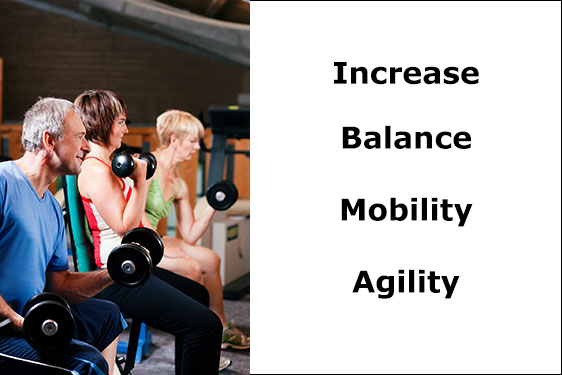
<style>
.page{position:relative;width:562px;height:375px;background:#ffffff}
.page>*{position:absolute;margin:0}
.t1{font:30px "Verdana-Bold";color:#000000}
</style>
<div class="page">
<p class="t1" style="left:334px;top:62px;width:145px;height:237px;text-align:center">Increase<br><br>Balance<br><br>Mobility<br><br>Agility</p>
</div>
